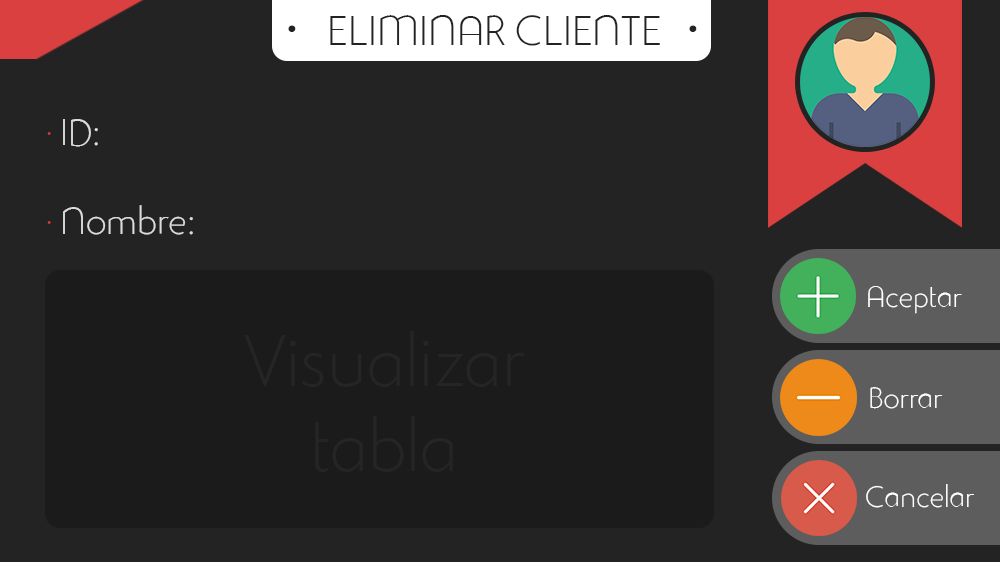
<style>
.page{position:relative;width:1000px;height:562px;background:#232323}
.page>*{position:absolute;margin:0}
.t1{font:41px "StudioGothicAlternateTrial-Extr";color:#232323}
.t2{font:97px "StudioGothicAlternateTrial-Extr";color:#232323}
.t3{font:37px "StudioGothicAlternateTrial-Extr";color:#dbdbdb}
.t4{font:37px "StudioGothicAlternateTrial-Extr";color:#d63f3f}
.t5{font:29px "StudioGothicAlternateTrial-Extr";color:#ffffff}
.t6{font:71px "StudioGothicAlternateTrial-Extr";color:#252525}
</style>
<div class="page">
<p class="t1" style="left:330px;top:15px;width:330px;height:31px">ELIMINAR CLIENTE</p>
<p class="t2" style="left:288px;top:25px;width:409px;height:7px">·                 ·</p>
<p class="t3" style="left:47px;top:119px;width:146px;height:116px"><span class="t4">· </span>ID:<br><span class="t4"><br>· </span>Nombre:</p>
<p class="t5" style="left:868px;top:286px;width:94px;height:28px">Aceptar</p>
<p class="t6" style="left:244px;top:331px;width:281px;height:141px;text-align:center">Visualizar<br>tabla</p>
<p class="t5" style="left:870px;top:387px;width:73px;height:22px">Borrar</p>
<p class="t5" style="left:866px;top:484px;width:109px;height:24px">Cancelar</p>
</div>
